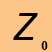
<style>
.page{position:relative;width:52px;height:52px;background:#fdc689}
.page>*{position:absolute;margin:0}
.t1{font:38px "LucidaSans-Italic";color:#000000}
.t2{font:13px "LiberationSerif-Bold";color:#000000}
</style>
<div class="page">
<p class="t1" style="left:13px;top:13px;width:25px;height:27px">Z</p>
<p class="t2" style="left:41px;top:41px;width:7px;height:9px">0</p>
</div>
